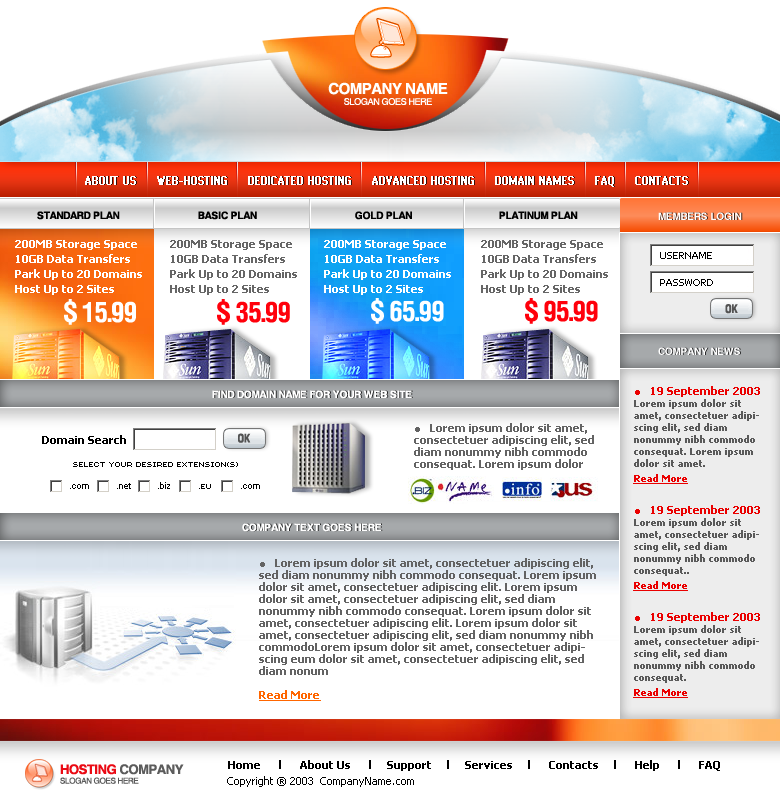
<style>
.page{position:relative;width:780px;height:804px;background:#ffffff}
.page>*{position:absolute;margin:0}
.t1{font:9px "Helios";letter-spacing:-0.04em;color:#ffffff}
.t2{font:15px "Helios-Bold";letter-spacing:-0.04em;color:#ffffff}
.t3{font:13px "WebCondensedC";color:#ffffff;font-weight:bold}
.t4{font:10px "Helios-Bold";letter-spacing:-0.02em;color:#000000}
.t5{font:10px "Helios-Bold";letter-spacing:-0.02em;color:#ffffff}
.t6{font:11px/15px "Tahoma-Bold";color:#ffffff}
.t7{font:11px/15px "Tahoma-Bold";color:#666666}
.t8{font:9px/27px "Tahoma";color:#000000}
.t9{font:28px "HeliosCond-Bold";letter-spacing:-0.04em;color:#ffffff}
.t10{font:28px "HeliosCond-Bold";letter-spacing:-0.04em;color:#ff000b}
.t11{font:12px "HeliosCond-Bold";letter-spacing:-0.02em;color:#535353}
.t12{font:10px/12px "Tahoma-Bold";color:#5a5a5a}
.t13{font:11px/13px "Tahoma-Bold";color:#ea0000}
.t14{font:10px/3px "Tahoma-Bold";color:#ea0000;text-decoration:underline}
.t15{font:11px/12px "Tahoma-Bold";color:#636363}
.t16{font:11px "Tahoma-Bold";color:#000000}
.t17{font:11px/12px "Tahoma-Bold";color:#ff6600;text-decoration:underline}
.t18{font:8px "Helios";letter-spacing:-0.04em;color:#5c5c5c}
.t19{font:13px "Helios-Bold";letter-spacing:-0.04em;color:#ea0a14}
.t20{font:13px "Helios-Bold";letter-spacing:-0.04em;color:#5c5c5c}
.t21{font:11px "Tahoma";color:#000000}
</style>
<div class="page">
<p class="t1" style="left:328px;top:82px;width:120px;height:23px;text-align:center"><span class="t2">COMPANY NAME<br></span>SLOGAN GOES HERE</p>
<p class="t3" style="left:85px;top:176px;width:603px;height:11px">ABOUT US     WEB-HOSTING     DEDICATED HOSTING     ADVANCED HOSTING     DOMAIN NAMES     FAQ     CONTACTS</p>
<p class="t4" style="left:37px;top:211px;width:541px;height:9px">STANDARD PLAN                            BASIC PLAN                                   GOLD PLAN                               PLATINUM PLAN</p>
<p class="t5" style="left:658px;top:212px;width:84px;height:8px">MEMBERS LOGIN</p>
<p class="t6" style="left:15px;top:240px;width:127px;height:55px">200MB Storage Space <br>10GB Data Transfers<br>Park Up to 20 Domains<br>Host Up to 2 Sites</p>
<p class="t7" style="left:170px;top:240px;width:127px;height:55px">200MB Storage Space <br>10GB Data Transfers<br>Park Up to 20 Domains<br>Host Up to 2 Sites</p>
<p class="t6" style="left:324px;top:240px;width:127px;height:55px">200MB Storage Space <br>10GB Data Transfers<br>Park Up to 20 Domains<br>Host Up to 2 Sites</p>
<p class="t7" style="left:481px;top:240px;width:127px;height:55px">200MB Storage Space <br>10GB Data Transfers<br>Park Up to 20 Domains<br>Host Up to 2 Sites</p>
<p class="t8" style="left:660px;top:252px;width:53px;height:34px">USERNAME<br>PASSWORD</p>
<p class="t9" style="left:64px;top:299px;width:72px;height:26px">$ 15.99</p>
<p class="t10" style="left:217px;top:299px;width:73px;height:26px">$ 35.99</p>
<p class="t9" style="left:371px;top:298px;width:73px;height:26px">$ 65.99</p>
<p class="t10" style="left:525px;top:298px;width:73px;height:26px">$ 95.99</p>
<p class="t11" style="left:725px;top:304px;width:13px;height:10px">OK</p>
<p class="t5" style="left:658px;top:347px;width:82px;height:8px">COMPANY NEWS</p>
<p class="t5" style="left:212px;top:390px;width:200px;height:9px">FIND DOMAIN NAME FOR YOUR WEB SITE</p>
<p class="t12" style="left:633px;top:386px;width:127px;height:98px"><span class="t13">●   19 September 2003<br></span>Lorem ipsum dolor sit amet, consectetuer adipiscing elit, sed diam nonummy nibh commodo consequat. Lorem ipsum dolor sit amet.<br><br><span class="t14">Read More</span></p>
<p class="t15" style="left:414px;top:423px;width:180px;height:47px">●   Lorem ipsum dolor sit amet, consectetuer adipiscing elit, sed diam nonummy nibh commodo consequat. Lorem ipsum dolor</p>
<p class="t16" style="left:42px;top:435px;width:84px;height:9px">Domain Search</p>
<p class="t11" style="left:238px;top:433px;width:13px;height:10px">OK</p>
<p class="t12" style="left:633px;top:505px;width:127px;height:86px"><span class="t13">●   19 September 2003<br></span>Lorem ipsum dolor sit amet, consectetuer adipiscing elit, sed diam nonummy nibh commodo consequat..<br><br><span class="t14">Read More</span></p>
<p class="t5" style="left:242px;top:523px;width:140px;height:9px">COMPANY TEXT GOES HERE</p>
<p class="t15" style="left:259px;top:558px;width:337px;height:143px">●   Lorem ipsum dolor sit amet, consectetuer adipiscing elit, sed diam nonummy nibh commodo consequat. Lorem ipsum dolor sit amet, consectetuer adipiscing elit. Lorem ipsum dolor sit amet, consectetuer adipiscing elit, sed diam nonummy nibh commodo consequat. Lorem ipsum dolor sit amet, consectetuer adipiscing elit. Lorem ipsum dolor sit amet, consectetuer adipiscing elit, sed diam nonummy nibh commodoLorem ipsum dolor sit amet, consectetuer adipiscing eum dolor sit amet, consectetuer adipiscing elit, sed diam nonum<br><br><span class="t17">Read More</span></p>
<p class="t12" style="left:633px;top:612px;width:127px;height:86px"><span class="t13">●   19 September 2003<br></span>Lorem ipsum dolor sit amet, consectetuer adipiscing elit, sed diam nonummy nibh commodo consequat.<br><br><span class="t14">Read More</span></p>
<p class="t16" style="left:228px;top:760px;width:492px;height:11px">Home      l      About Us      l     Support     l     Services     l      Contacts     l      Help      l      FAQ</p>
<p class="t18" style="left:60px;top:764px;width:124px;height:20px"><span class="t19">HOSTING</span><span class="t20"> COMPANY<br></span>SLOGAN GOES HERE</p>
<p class="t21" style="left:227px;top:776px;width:187px;height:11px">Copyright ® 2003  CompanyName.com</p>
</div>
